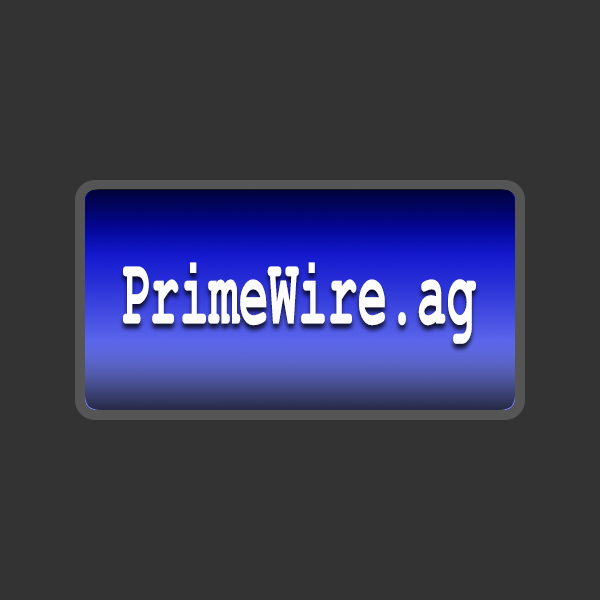
<style>
.page{position:relative;width:600px;height:600px;background:#333333}
.page>*{position:absolute;margin:0}
.t1{font:96.1px "CourierNewPS-BoldMT";color:#fdfdfe;scale:0.51 1}
</style>
<div class="page">
<p class="t1" style="left:123px;top:262px;width:353px;height:82px">PrimeWire.ag</p>
</div>
